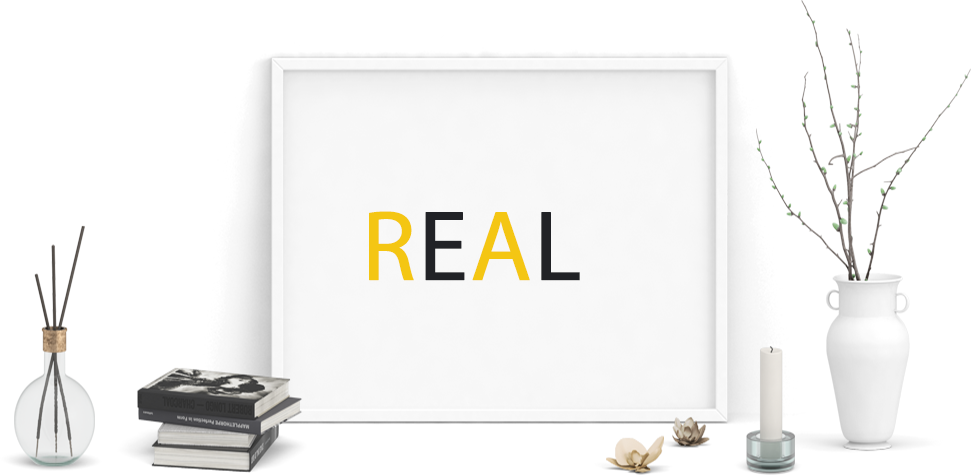
<style>
.page{position:relative;width:971px;height:475px;background:#ffffff}
.page>*{position:absolute;margin:0}
.t1{font:100px "MyriadPro-Regular";color:#f4c613;font-weight:bold}
.t2{font:100px "MyriadPro-Regular";color:#212226;font-weight:bold}
</style>
<div class="page">
<p class="t1" style="left:369px;top:211px;width:211px;height:70px">R<span class="t2">E</span>A<span class="t2">L</span></p>
</div>
